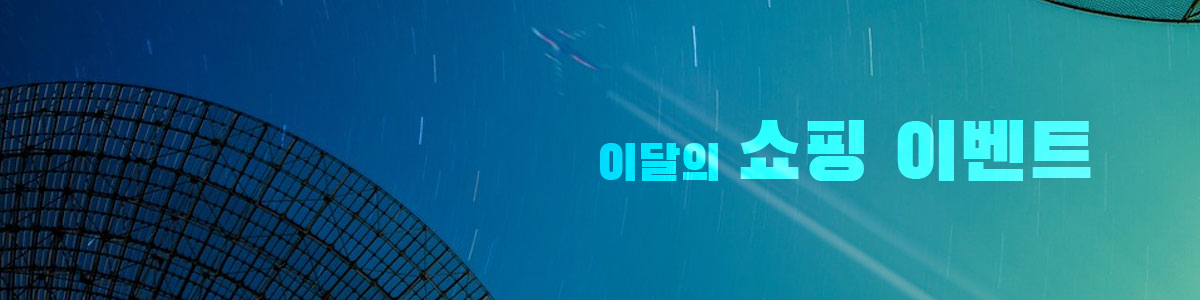
<style>
.page{position:relative;width:1200px;height:300px}
.page>*{position:absolute;margin:0}
.t1{font:80px "BlackHanSans-Regular"}
.t2{font:50px "BlackHanSans-Regular"}
</style>
<div class="page">
<p class="t1" style="left:600px;top:120px;width:491px;height:61px"><span class="t2">이달의 </span>쇼핑 이벤트</p>
</div>
